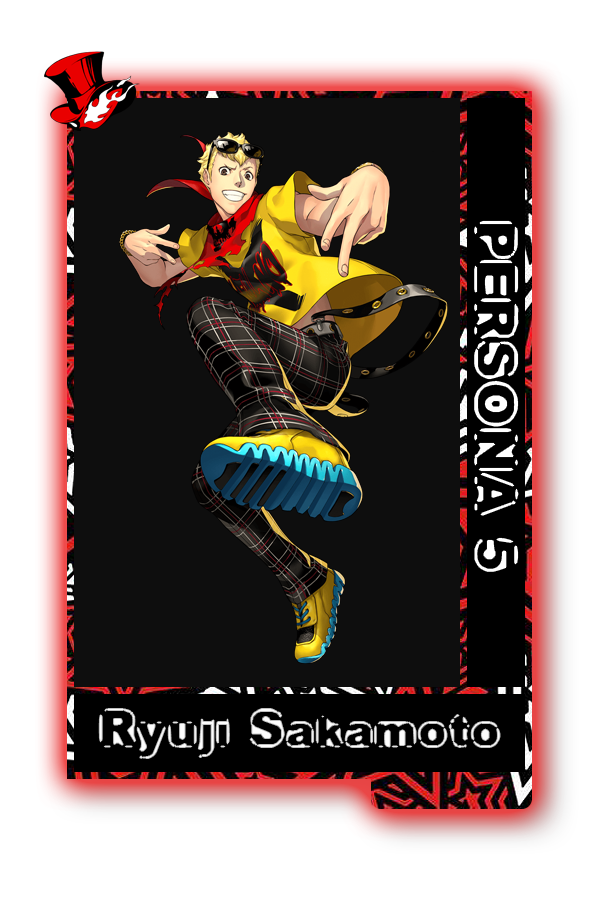
<style>
.page{position:relative;width:600px;height:900px;background:#0e0e0e}
.page>*{position:absolute;margin:0}
.t1{font:41.7px "Untitled";color:#ffffff}
.t2{font:37.5px "Untitled";color:#fdfdfd}
</style>
<div class="page">
<p class="t1" style="left:475px;top:221px;width:43px;height:350px;rotate:90deg">PERSONA 5</p>
<p class="t2" style="left:99px;top:709px;width:401px;height:49px">Ryuji Sakamoto</p>
</div>
